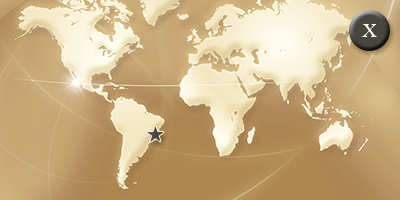
<style>
.page{position:relative;width:400px;height:200px}
.page>*{position:absolute;margin:0}
.t1{font:20px "CarminaBT-Medium";letter-spacing:-0.05em;color:#fefceb}
</style>
<div class="page">
<p class="t1" style="left:362px;top:24px;width:15px;height:13px">X</p>
</div>
